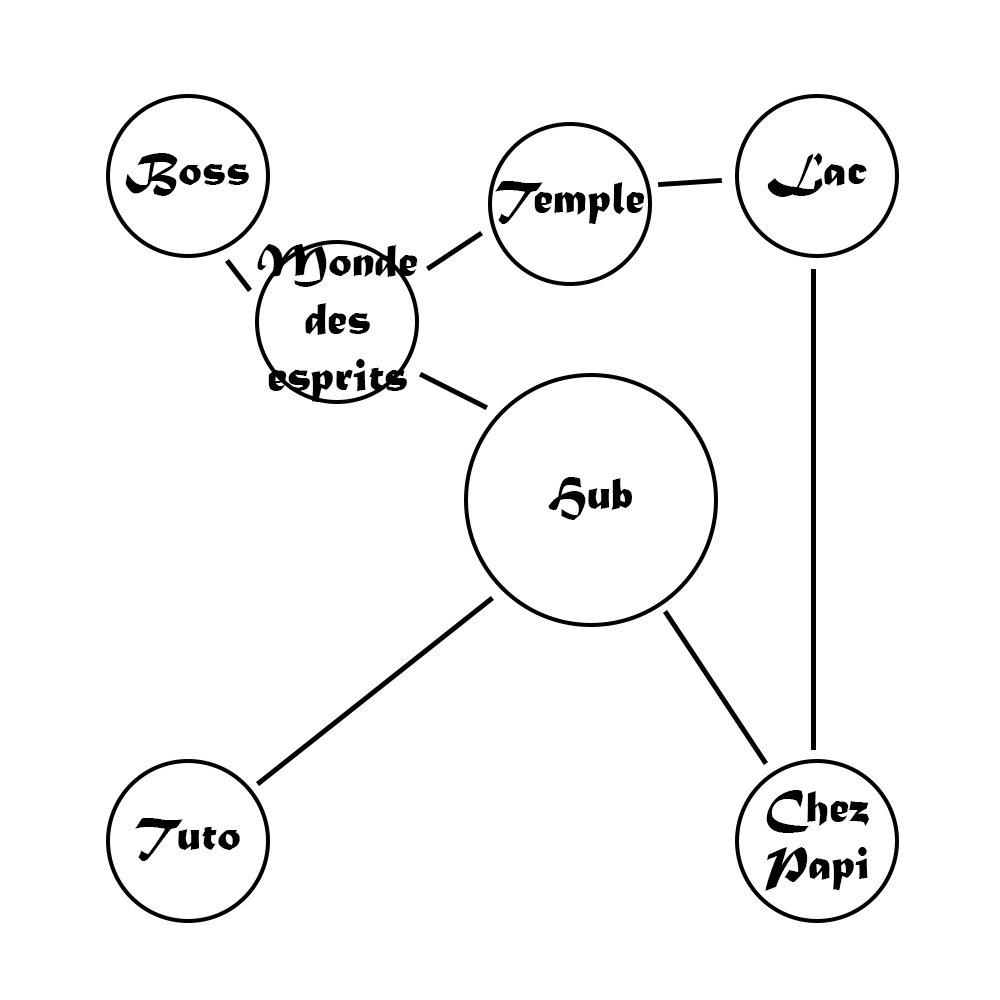
<style>
.page{position:relative;width:1000px;height:1000px;background:#ffffff}
.page>*{position:absolute;margin:0}
.t1{font:48px "MaturaMTScriptCapitals";color:#000000}
</style>
<div class="page">
<p class="t1" style="left:125px;top:153px;width:124px;height:43px">Boss</p>
<p class="t1" style="left:767px;top:153px;width:100px;height:44px">Lac</p>
<p class="t1" style="left:495px;top:181px;width:150px;height:43px">Temple</p>
<p class="t1" style="left:257px;top:244px;width:161px;height:158px;text-align:center">Monde<br>des<br>esprits</p>
<p class="t1" style="left:548px;top:477px;width:84px;height:43px">Hub</p>
<p class="t1" style="left:765px;top:790px;width:105px;height:101px;text-align:center">Chez<br>Papi</p>
<p class="t1" style="left:135px;top:818px;width:105px;height:43px">Tuto</p>
</div>
